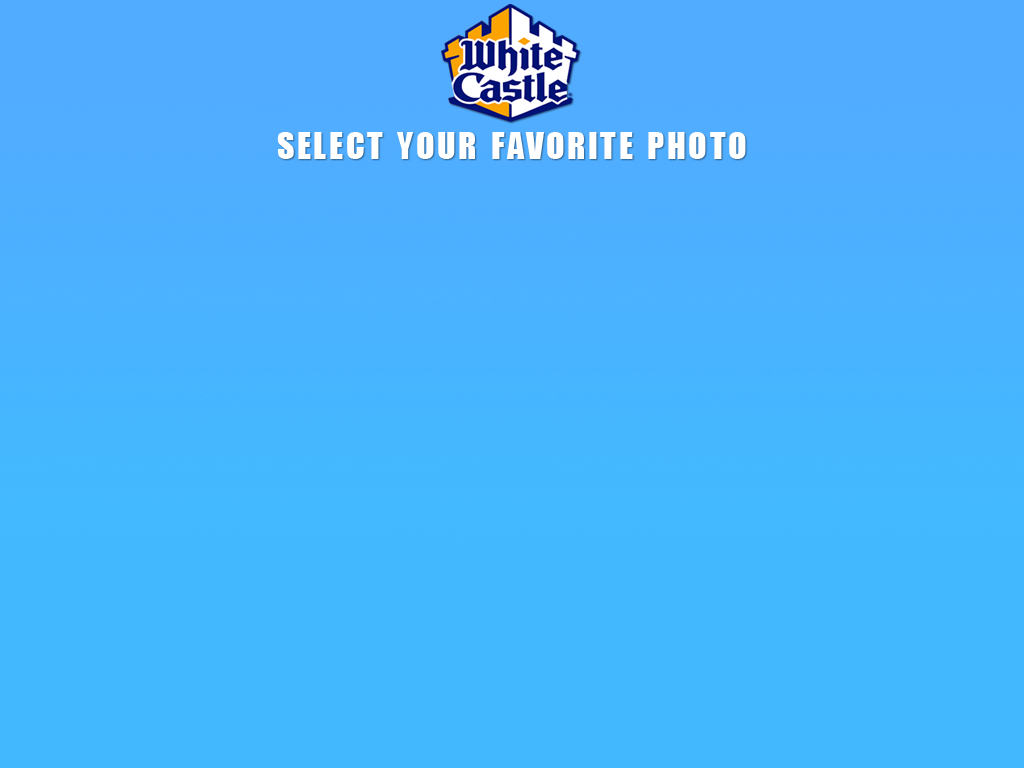
<style>
.page{position:relative;width:1024px;height:768px;background:#42b9ff}
.page>*{position:absolute;margin:0}
.t1{font:48px "Impact";letter-spacing:0.07em;color:#ffffff;font-variant:small-caps}
</style>
<div class="page">
<p class="t1" style="left:277px;top:132px;width:469px;height:27px">select your favorite photo</p>
</div>
